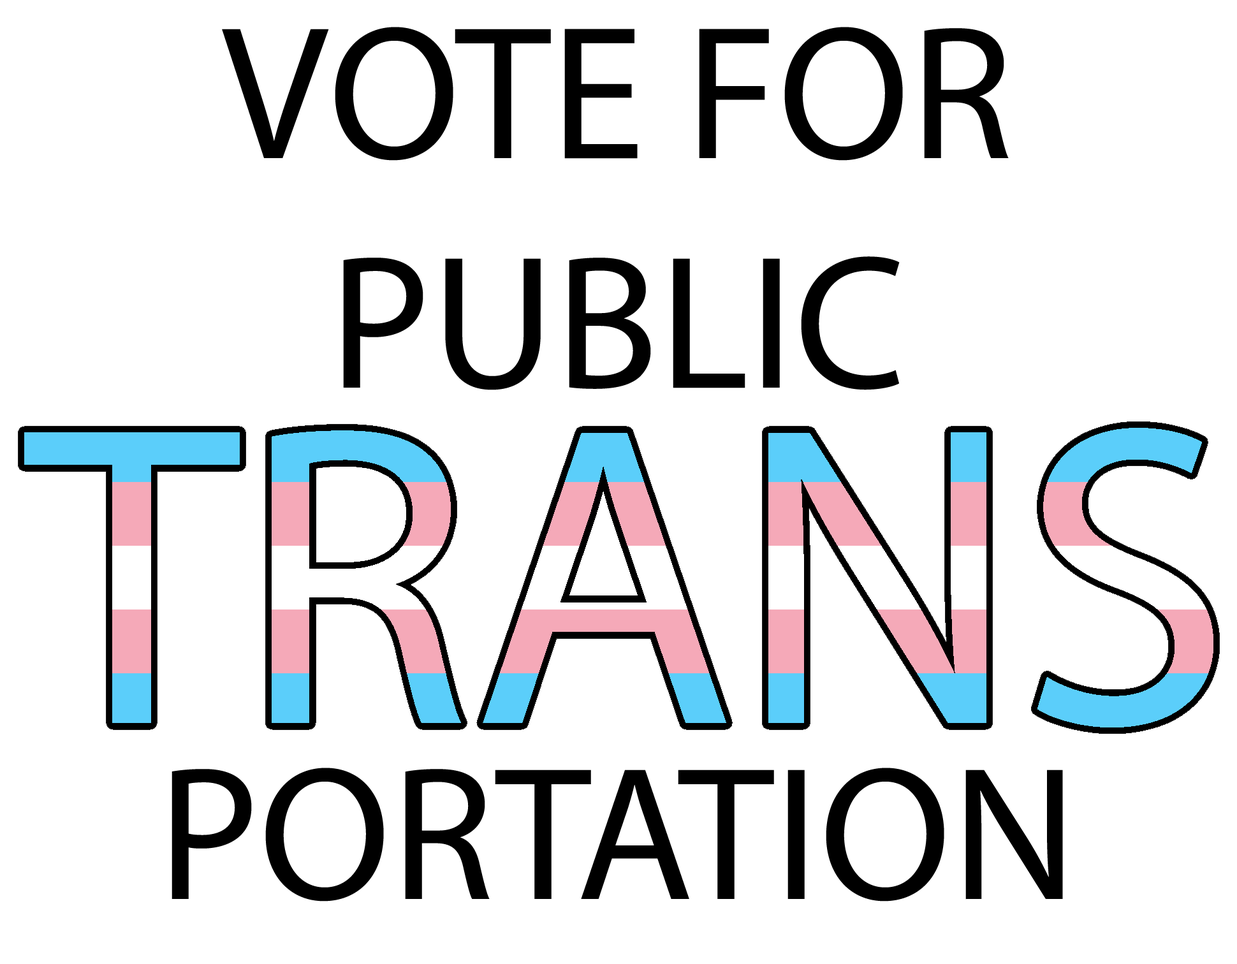
<style>
.page{position:relative;width:1237px;height:964px;background:#ffffff}
.page>*{position:absolute;margin:0}
.t1{font:191.3px "MyriadPro-Regular";color:#000000}
</style>
<div class="page">
<p class="t1" style="left:222px;top:27px;width:787px;height:363px;text-align:center">VOTE FOR PUBLIC</p>
<p class="t1" style="left:172px;top:768px;width:891px;height:134px">PORTATION</p>
</div>
